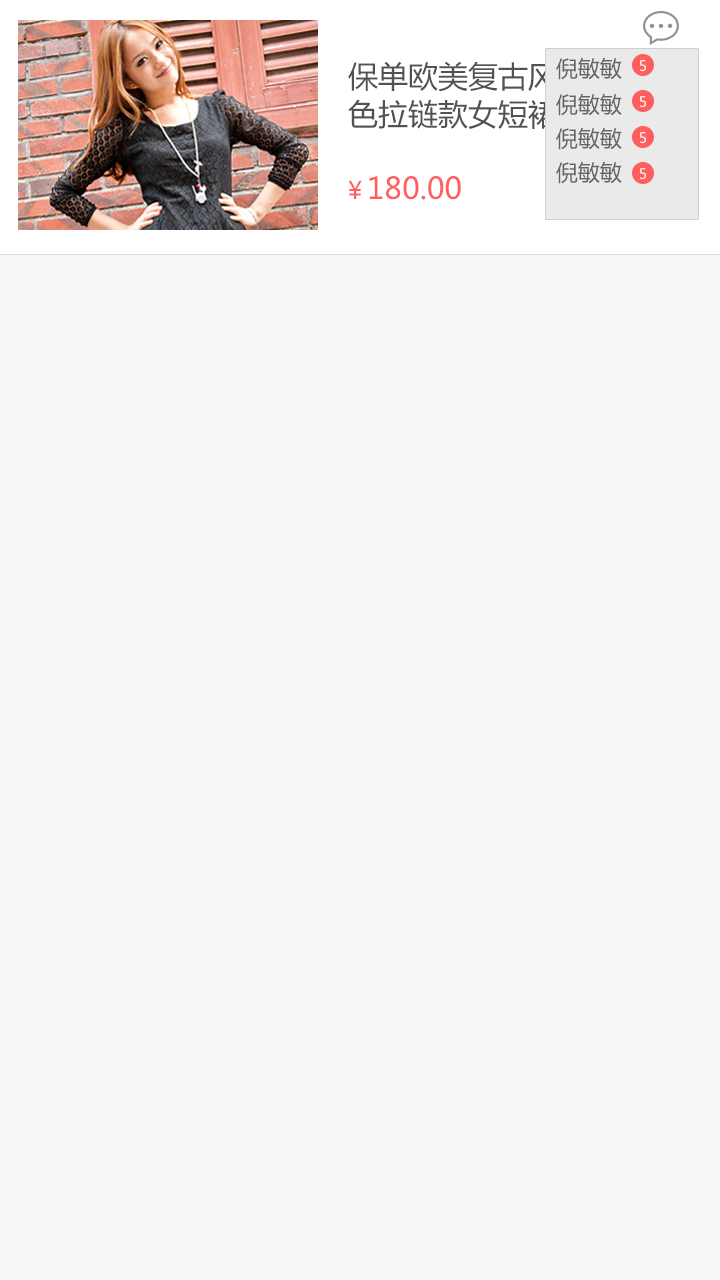
<style>
.page{position:relative;width:720px;height:1280px;background:#f7f7f7}
.page>*{position:absolute;margin:0}
.t1{font:30px/38px "MicrosoftYaHei";color:#525252}
.t2{font:22px "MicrosoftYaHei";color:#646464}
.t3{font:14px "MicrosoftYaHei";color:#ffffff}
.t4{font:30px "MicrosoftYaHei";color:#ff5f5f}
.t5{font:24px "MicrosoftYaHei";color:#ff5f5f}
</style>
<div class="page">
<p class="t1" style="left:348px;top:61px;width:330px;height:68px">保单欧美复古风女短裙黑<br>色拉链款女短裙...</p>
<p class="t2" style="left:556px;top:57px;width:66px;height:23px">倪敏敏</p>
<p class="t3" style="left:640px;top:60px;width:6px;height:11px">5</p>
<p class="t2" style="left:556px;top:93px;width:66px;height:23px">倪敏敏</p>
<p class="t3" style="left:640px;top:96px;width:6px;height:11px">5</p>
<p class="t2" style="left:556px;top:127px;width:66px;height:23px">倪敏敏</p>
<p class="t3" style="left:640px;top:132px;width:6px;height:11px">5</p>
<p class="t2" style="left:556px;top:161px;width:66px;height:23px">倪敏敏</p>
<p class="t3" style="left:640px;top:168px;width:6px;height:11px">5</p>
<p class="t4" style="left:348px;top:176px;width:113px;height:24px"><span class="t5">￥</span>180.00</p>
</div>
